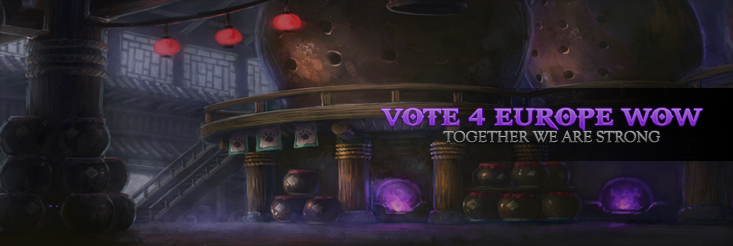
<style>
.page{position:relative;width:733px;height:246px}
.page>*{position:absolute;margin:0}
.t1{font:26px "GodOfWar"}
.t2{font:16px "GoudyOldStyleT-Regular"}
</style>
<div class="page">
<p class="t1" style="left:381px;top:108px;width:322px;height:23px">VOTE 4 EUROPE WOW</p>
<p class="t2" style="left:443px;top:130px;width:217px;height:13px">TOGETHER WE ARE STRONG</p>
</div>
